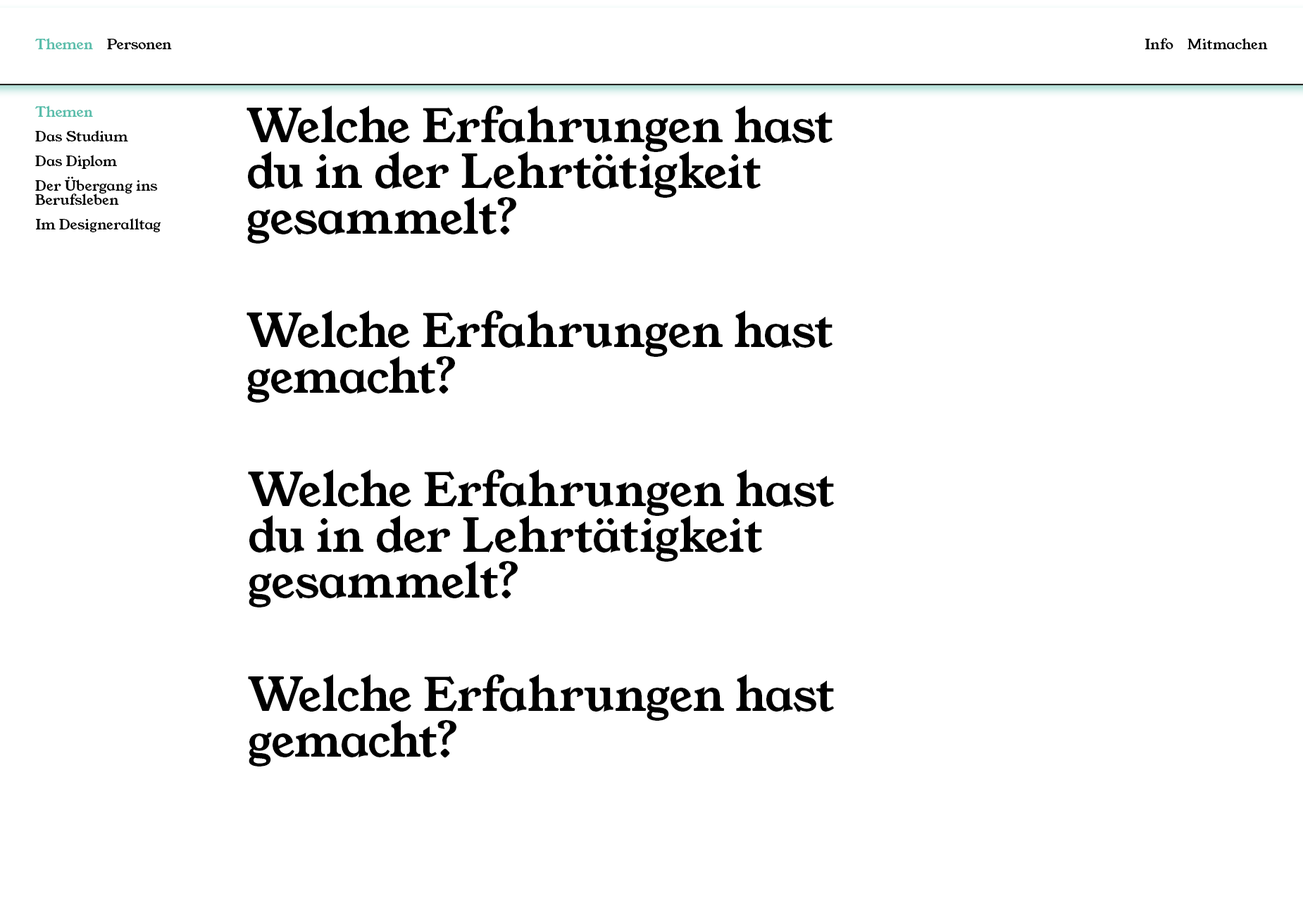
<style>
.page{position:relative;width:1303px;height:915px;background:#ffffff}
.page>*{position:absolute;margin:0}
.t1{font:14.1px "YoungSerif-Regular";color:#5bbeac}
.t2{font:14.1px "YoungSerif-Regular";color:#000000}
.t3{font:14.1px/24.6px "YoungSerif-Regular";color:#000000}
.t4{font:14.1px/24.6px "YoungSerif-Regular";color:#5bbeac}
.t5{font:14.1px/14.1px "YoungSerif-Regular";color:#000000}
.t6{font:45.8px/45.8px "YoungSerif-Regular";color:#000000}
</style>
<div class="page">
<p class="t1" style="left:35px;top:38px;width:58px;height:11px">Themen</p>
<p class="t2" style="left:107px;top:39px;width:65px;height:10px">Personen</p>
<p class="t2" style="left:1145px;top:38px;width:28px;height:11px">Info</p>
<p class="t2" style="left:1187px;top:38px;width:80px;height:11px">Mitmachen</p>
<p class="t3" style="left:35px;top:106px;width:126px;height:126px"><span class="t4">Themen<br></span>Das Studium<br>Das Diplom<br>Der Übergang ins <span class="t5">Berufsleben<br></span>Im Designeralltag</p>
<p class="t6" style="left:246px;top:106px;width:586px;height:138px">Welche Erfahrungen hast<br>du in der Lehrtätigkeit<br>gesammelt?</p>
<p class="t6" style="left:246px;top:311px;width:586px;height:92px">Welche Erfahrungen hast<br>gemacht?</p>
<p class="t6" style="left:248px;top:470px;width:586px;height:138px">Welche Erfahrungen hast<br>du in der Lehrtätigkeit<br>gesammelt?</p>
<p class="t6" style="left:248px;top:675px;width:586px;height:92px">Welche Erfahrungen hast<br>gemacht?</p>
</div>
